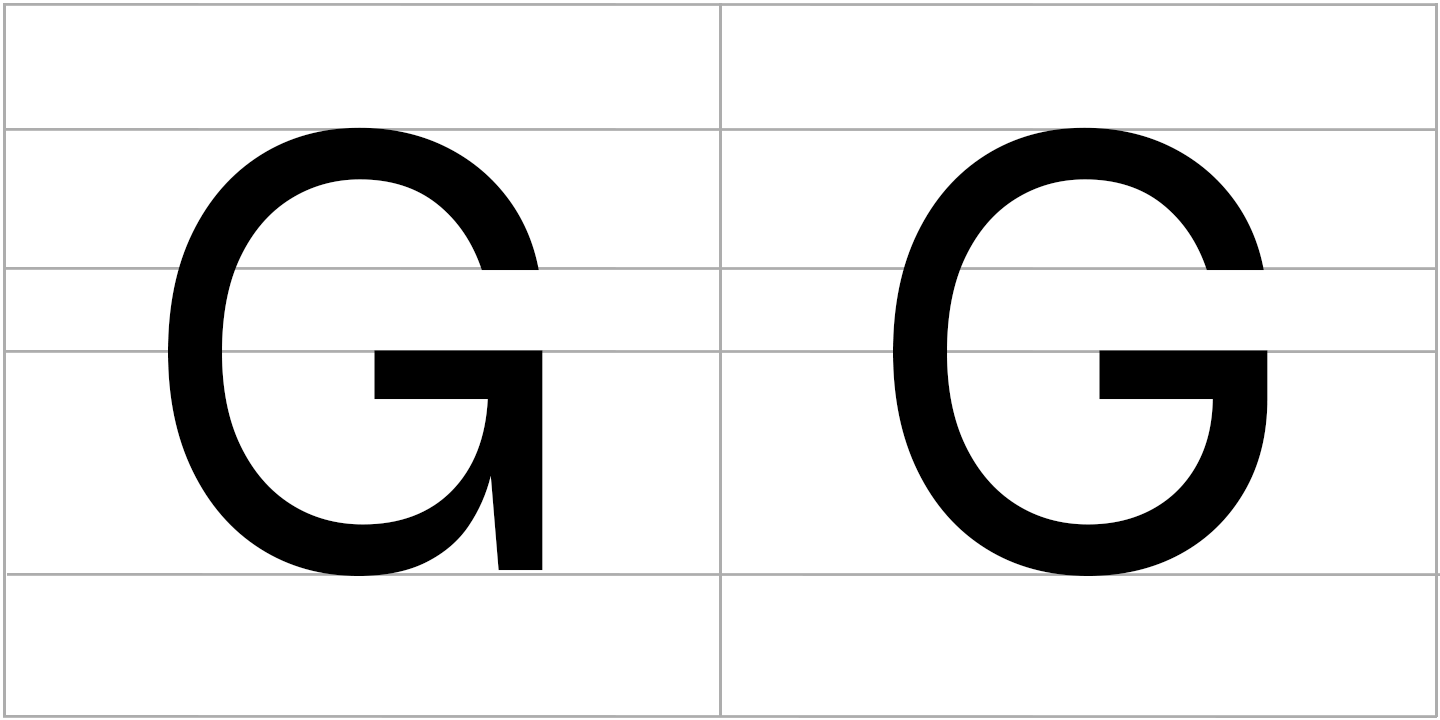
<style>
.page{position:relative;width:1440px;height:720px;background:#ffffff}
.page>*{position:absolute;margin:0}
.t1{font:600px "Sarasa-Gothic-SC-Regular";color:#000000}
.t2{font:600px "Sarasa-Ji-Gothic--SC-Regular";color:#000000}
</style>
<div class="page">
<p class="t1" style="left:168px;top:127px;width:375px;height:449px">G</p>
<p class="t2" style="left:893px;top:127px;width:375px;height:449px">G</p>
</div>
